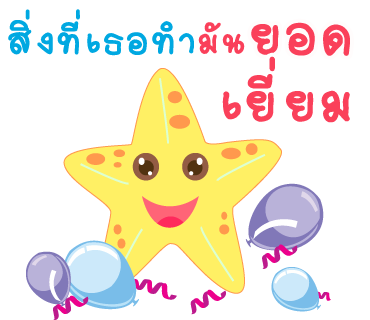
<style>
.page{position:relative;width:370px;height:320px;background:#ffffff}
.page>*{position:absolute;margin:0}
.t1{font:59px "2005_iannnnnMTV";letter-spacing:0.025em;color:#00a8e1;scale:1.06 1}
.t2{font:54px "2005_iannnnnMTV";letter-spacing:0.025em;color:#fa405a;scale:1.06 1}
.t3{font:85px "2005_iannnnnMTV";letter-spacing:0.025em;color:#fa405a;scale:1.06 1}
</style>
<div class="page">
<p class="t1" style="left:8px;top:9px;width:186px;height:47px">สิ่งที่เธอทำ</p>
<p class="t2" style="left:198px;top:22px;width:47px;height:32px">มัน</p>
<p class="t3" style="left:251px;top:22px;width:99px;height:34px">ยอด</p>
<p class="t3" style="left:222px;top:56px;width:128px;height:67px">เยี่ยม</p>
</div>
